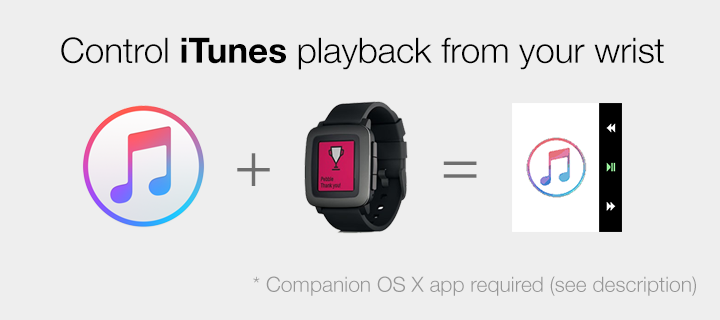
<style>
.page{position:relative;width:720px;height:320px;background:#eeeeee}
.page>*{position:absolute;margin:0}
.t1{font:35px "HelveticaNeue-Light";color:#000000}
.t2{font:35px "HelveticaNeue-Bold";color:#000000}
.t3{font:65px "HelveticaNeue-Light";color:#6e6e6e}
.t4{font:21px "HelveticaNeue-Light";color:#969696}
</style>
<div class="page">
<p class="t1" style="left:61px;top:37px;width:603px;height:33px">Control <span class="t2">iTunes </span>playback from your wrist</p>
<p class="t3" style="left:237px;top:153px;width:33px;height:33px">+</p>
<p class="t3" style="left:443px;top:161px;width:34px;height:17px">=</p>
<p class="t4" style="left:253px;top:276px;width:443px;height:20px">* Companion OS X app required (see description)</p>
</div>
